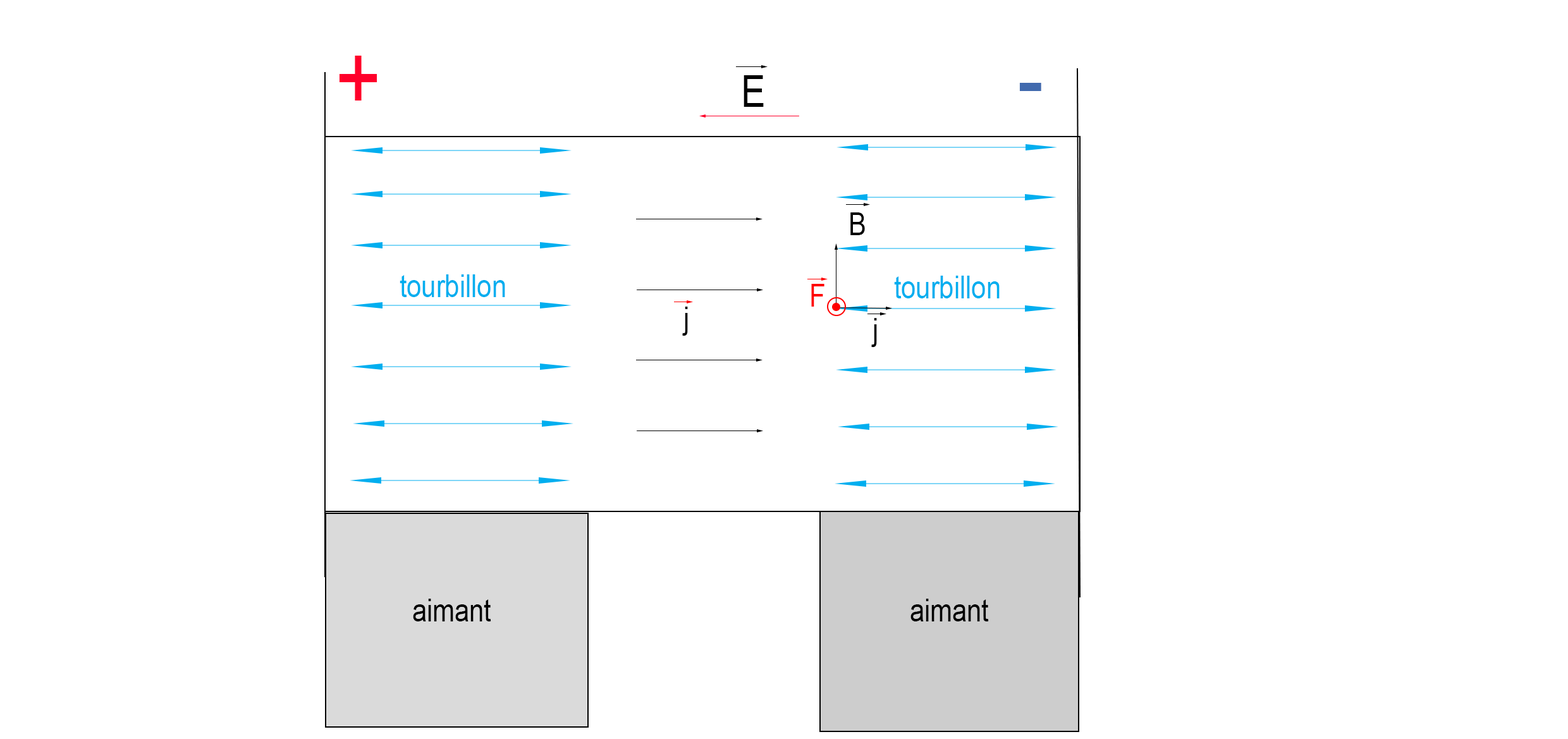
<style>
.page{position:relative;width:1568px;height:739px;background:#ffffff}
.page>*{position:absolute;margin:0}
.t1{font:94.8px "ArialMT";color:#ff002a;scale:0.83 1}
.t2{font:44.3px "ArialMT";color:#000000;scale:0.83 1}
.t3{font:94.8px "ArialMT";color:#416aae;scale:0.83 1}
.t4{font:31.6px "ArialMT";color:#000000;scale:0.83 1}
.t5{font:31.6px "ArialMT";color:#00aeef;scale:0.83 1}
.t6{font:31.6px "ArialMT";color:#ff0000;scale:0.83 1}
</style>
<div class="page">
<p class="t1" style="left:339px;top:56px;width:38px;height:45px">+</p>
<p class="t2" style="left:744px;top:75px;width:20px;height:32px">E</p>
<p class="t3" style="left:1019px;top:83px;width:22px;height:8px">-</p>
<p class="t4" style="left:850px;top:212px;width:15px;height:23px">B</p>
<p class="t5" style="left:400px;top:274px;width:105px;height:23px">tourbillon</p>
<p class="t5" style="left:894px;top:276px;width:106px;height:22px">tourbillon</p>
<p class="t6" style="left:811px;top:284px;width:13px;height:23px">F</p>
<p class="t4" style="left:682px;top:307px;width:6px;height:29px">j</p>
<p class="t4" style="left:871px;top:318px;width:6px;height:29px">j</p>
<p class="t4" style="left:413px;top:599px;width:78px;height:23px">aimant</p>
<p class="t4" style="left:910px;top:599px;width:79px;height:23px">aimant</p>
</div>
